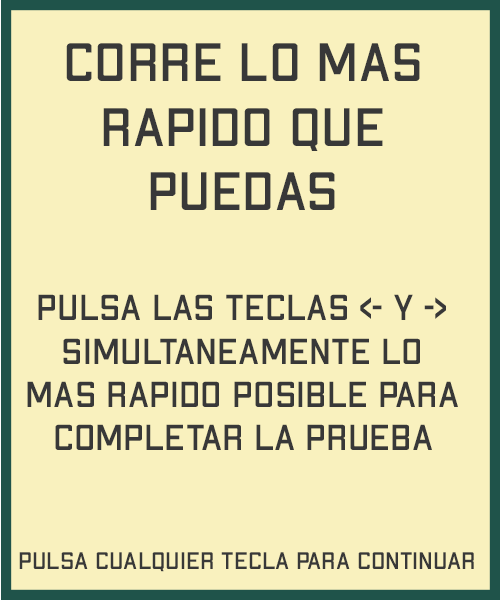
<style>
.page{position:relative;width:500px;height:600px;background:#f9f1be}
.page>*{position:absolute;margin:0}
.t1{font:54px "ApexMk2-Regular";color:#383838}
.t2{font:36px "ApexMk2-Regular";color:#383838}
.t3{font:24px "ApexMk2-Regular";color:#383838}
</style>
<div class="page">
<p class="t1" style="left:66px;top:43px;width:354px;height:167px;text-align:center">corre lo mas <br>rapido que <br>puedas</p>
<p class="t2" style="left:27px;top:294px;width:431px;height:156px;text-align:center">pulsa las teclas &lt;- y -&gt; <br>simultaneamente lo <br>mas rapido posible para <br>completar la prueba</p>
<p class="t3" style="left:19px;top:552px;width:455px;height:20px">pulsa cualquier tecla para continuar</p>
</div>
